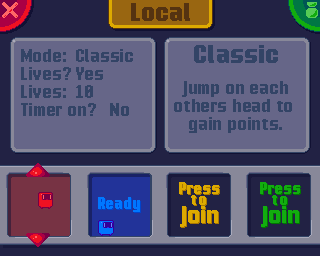
<style>
.page{position:relative;width:320px;height:256px;background:#666688}
.page>*{position:absolute;margin:0}
.t1{font:32px "MotionControl-Bold";color:#553311}
.t2{font:23px/18px "MotionControl-Bold";color:#334466}
.t3{font:32px "MotionControl-Bold";color:#334466}
</style>
<div class="page">
<p class="t1" style="left:131px;top:3px;width:59px;height:18px">Local</p>
<p class="t2" style="left:21px;top:49px;width:75px;height:67px">Mode:<br>Lives?<br>Lives:<br>Timer on?</p>
<p class="t2" style="left:76px;top:49px;width:57px;height:67px">Classic<br>Yes<br>10<br>       No</p>
<p class="t3" style="left:194px;top:45px;width:84px;height:18px">Classic</p>
<p class="t2" style="left:174px;top:81px;width:118px;height:52px;text-align:center">Jump on each<br>others head to <br>gain points.</p>
</div>
